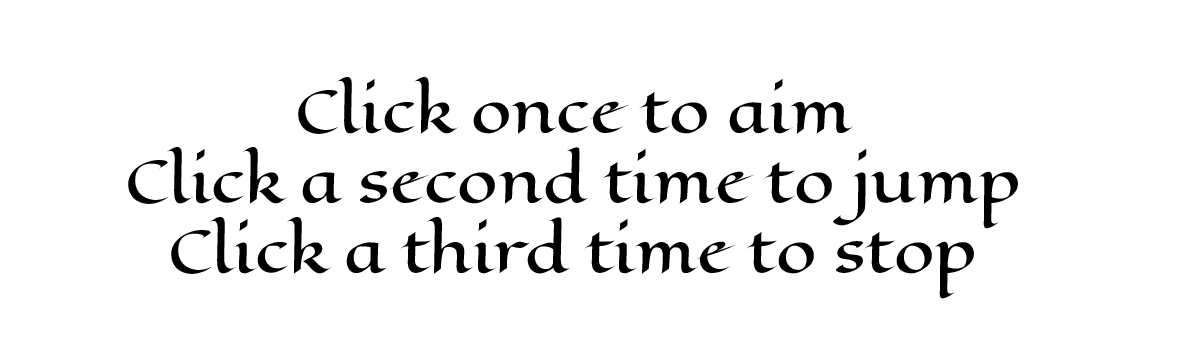
<style>
.page{position:relative;width:1179px;height:338px;background:#ffffff}
.page>*{position:absolute;margin:0}
.t1{font:58.3px "EagleLake-Regular";color:#000000}
</style>
<div class="page">
<p class="t1" style="left:128px;top:77px;width:890px;height:222px;text-align:center">Click once to aim<br>Click a second time to jump<br>Click a third time to stop</p>
</div>
